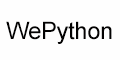
<style>
.page{position:relative;width:120px;height:60px;background:#fefefe}
.page>*{position:absolute;margin:0}
.t1{font:24px "ArialMT";letter-spacing:-0.02em;color:#030303}
</style>
<div class="page">
<p class="t1" style="left:6px;top:21px;width:106px;height:23px">WePython</p>
</div>
